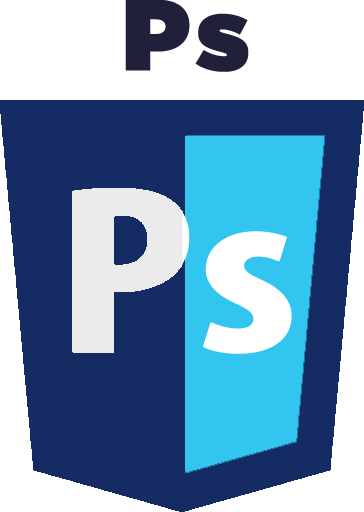
<style>
.page{position:relative;width:364px;height:512px;background:#152b63}
.page>*{position:absolute;margin:0}
.t1{font:100px "GothamUltra";letter-spacing:0.04em;color:#21203a;font-weight:bold}
</style>
<div class="page">
<p class="t1" style="left:125px;top:0px;width:124px;height:72px">Ps</p>
</div>
